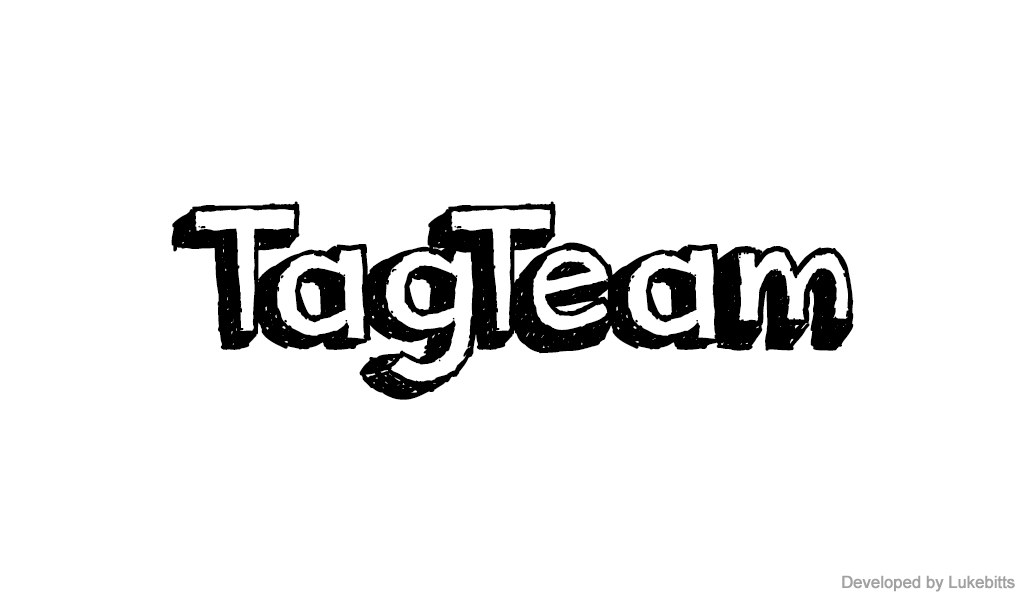
<style>
.page{position:relative;width:1024px;height:600px;background:#ffffff}
.page>*{position:absolute;margin:0}
.t1{font:200px "orangejuice";letter-spacing:-0.025em;color:#000000;font-weight:bold}
.t2{font:16.7px "ArialMT";letter-spacing:-0.025em;color:#a1a1a1;font-weight:bold}
</style>
<div class="page">
<p class="t1" style="left:171px;top:201px;width:683px;height:199px">TagTeam</p>
<p class="t2" style="left:842px;top:575px;width:173px;height:17px">Developed by Lukebitts</p>
</div>
